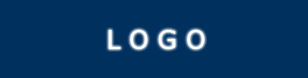
<style>
.page{position:relative;width:308px;height:78px;background:#00305e}
.page>*{position:absolute;margin:0}
.t1{font:25px "Verdana";color:#ffffff}
</style>
<div class="page">
<p class="t1" style="left:108px;top:30px;width:97px;height:19px">L O G O</p>
</div>
